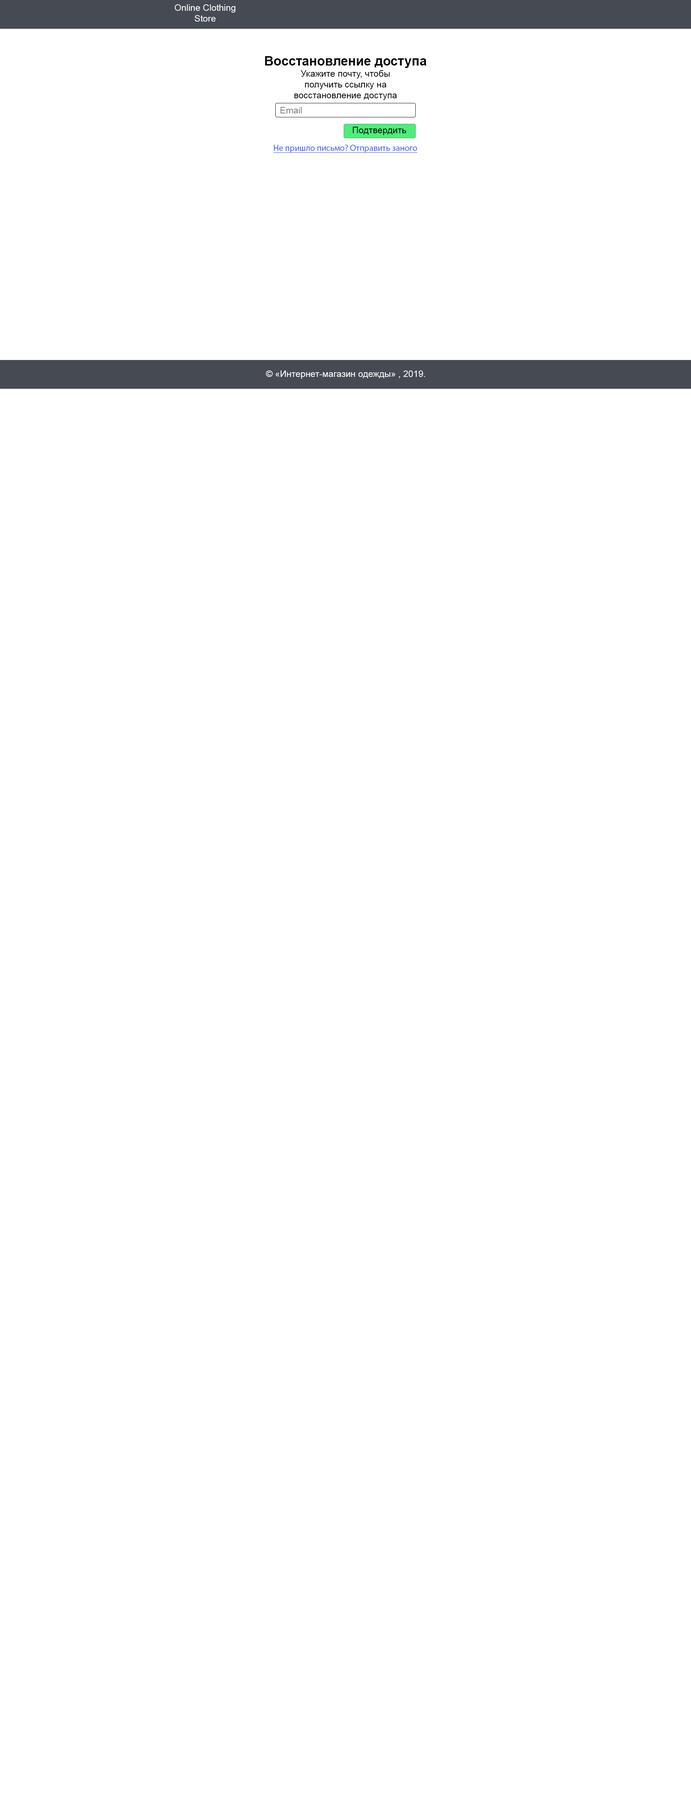
<style>
.page{position:relative;width:691px;height:1800px;background:#ffffff}
.page>*{position:absolute;margin:0}
.t1{font:9px "ArialMT";color:#ffffff}
.t2{font:13px "Arial-BoldMT";color:#000000}
.t3{font:9px "ArialMT";color:#000000}
.t4{font:9px "ArialMT";color:#7e7c7c}
.t5{font:8.6px "MyriadPro-Regular";color:#4e65f5;text-decoration:underline}
</style>
<div class="page">
<p class="t1" style="left:175px;top:4px;width:60px;height:18px;text-align:center">Online Clothing <br>Store</p>
<p class="t2" style="left:265px;top:56px;width:162px;height:12px">Восстановление доступа</p>
<p class="t3" style="left:294px;top:70px;width:103px;height:30px;text-align:center">Укажите почту, чтобы получить ссылку на восстановление доступа</p>
<p class="t4" style="left:280px;top:107px;width:22px;height:6px">Email</p>
<p class="t3" style="left:353px;top:127px;width:53px;height:8px">Подтвердить</p>
<p class="t5" style="left:273px;top:145px;width:145px;height:8px">Не пришло письмо? Отправить заного</p>
<p class="t1" style="left:266px;top:370px;width:159px;height:9px">© «Интернет-магазин одежды» , 2019.</p>
</div>
